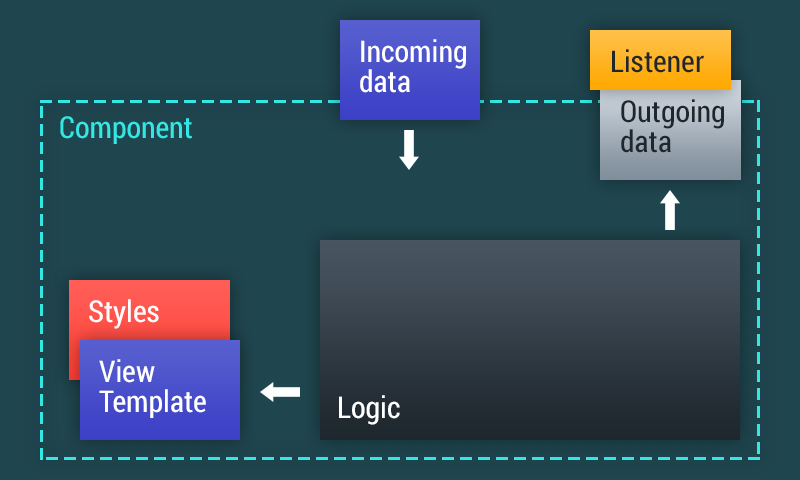
<style>
.page{position:relative;width:800px;height:480px;background:#1f454e}
.page>*{position:absolute;margin:0}
.t1{font:30px/20px "RobotoCondensed-Regular";color:#ffffff}
.t2{font:30px "RobotoCondensed-Regular";color:#1e272e}
.t3{font:30px/20px "RobotoCondensed-Regular";color:#1e272e}
.t4{font:30px "RobotoCondensed-Regular";color:#34e7e4}
.t5{font:30px "RobotoCondensed-Regular";color:#ffffff}
</style>
<div class="page">
<p class="t1" style="left:360px;top:39px;width:106px;height:54px">Incoming<br>data</p>
<p class="t2" style="left:612px;top:49px;width:92px;height:24px">Listener</p>
<p class="t3" style="left:621px;top:99px;width:103px;height:54px">Outgoing<br>data</p>
<p class="t4" style="left:60px;top:116px;width:132px;height:28px">Component</p>
<p class="t5" style="left:89px;top:299px;width:70px;height:30px">Styles</p>
<p class="t1" style="left:99px;top:359px;width:107px;height:59px">View<br>Template</p>
<p class="t5" style="left:339px;top:395px;width:61px;height:30px">Logic</p>
</div>
